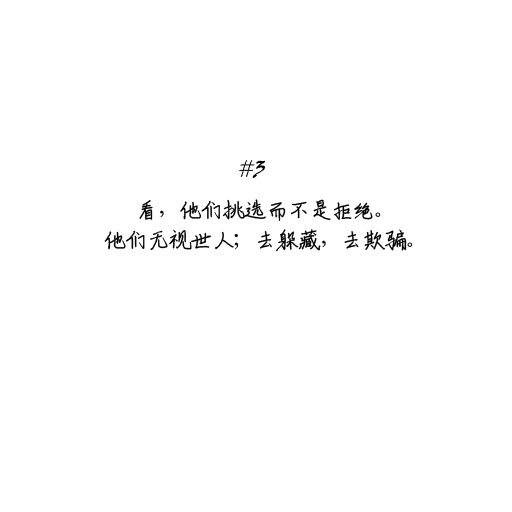
<style>
.page{position:relative;width:512px;height:512px;background:#ffffff}
.page>*{position:absolute;margin:0}
.t1{font:24px/30px "ShouShuti";letter-spacing:-0.1em;color:#000000}
</style>
<div class="page">
<p class="t1" style="left:104px;top:199px;width:309px;height:53px;text-align:center">看，他们挑选而不是拒绝。<br>他们无视世人；去躲藏，去欺骗。</p>
</div>
